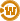
<style>
.page{position:relative;width:20px;height:21px;background:#d07f05}
.page>*{position:absolute;margin:0}
.t1{font:12.1px "LuckiestGuy-Regular";letter-spacing:-0.15em;color:#d07f05}
</style>
<div class="page">
<p class="t1" style="left:5px;top:7px;width:11px;height:8px">W</p>
</div>
